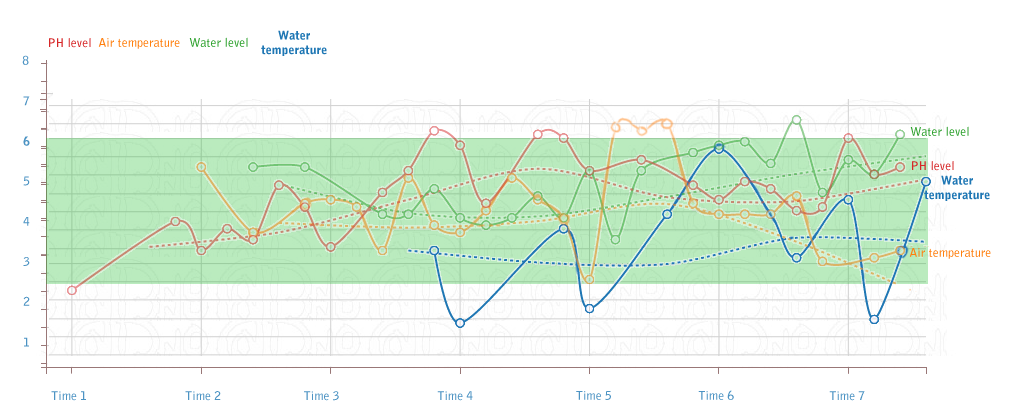
<style>
.page{position:relative;width:1010px;height:416px;background:#ffffff}
.page>*{position:absolute;margin:0}
.t1{font:12px "BellGothicStd-Black";color:#1f77b4}
.t2{font:12px "BellGothicStd-Bold";color:#d62728}
.t3{font:12px "BellGothicStd-Bold";color:#ff7f0e}
.t4{font:12px "BellGothicStd-Bold";color:#2ca02c}
.t5{font:12px "BellGothicStd-Bold";color:#4c93c3}
.t6{font:12px "BellGothicStd-Black";color:#4c93c3}
</style>
<div class="page">
<p class="t1" style="left:261px;top:30px;width:66px;height:26px;text-align:center">Water<br>temperature</p>
<p class="t2" style="left:49px;top:38px;width:42px;height:10px">PH level</p>
<p class="t3" style="left:98px;top:38px;width:82px;height:11px">Air temperature</p>
<p class="t4" style="left:189px;top:37px;width:59px;height:10px">Water level</p>
<p class="t5" style="left:22px;top:55px;width:7px;height:10px">8</p>
<p class="t5" style="left:23px;top:96px;width:7px;height:10px">7</p>
<p class="t4" style="left:910px;top:126px;width:59px;height:10px">Water level</p>
<p class="t6" style="left:23px;top:136px;width:7px;height:10px">6</p>
<p class="t2" style="left:912px;top:161px;width:42px;height:10px">PH level</p>
<p class="t5" style="left:23px;top:176px;width:7px;height:10px">5</p>
<p class="t1" style="left:924px;top:175px;width:66px;height:26px;text-align:center">Water<br>temperature</p>
<p class="t5" style="left:23px;top:217px;width:7px;height:9px">4</p>
<p class="t5" style="left:23px;top:257px;width:7px;height:9px">3</p>
<p class="t3" style="left:909px;top:248px;width:82px;height:11px">Air temperature</p>
<p class="t5" style="left:23px;top:296px;width:7px;height:10px">2</p>
<p class="t5" style="left:24px;top:337px;width:5px;height:10px">1</p>
<p class="t5" style="left:698px;top:390px;width:36px;height:10px">Time 6</p>
<p class="t5" style="left:51px;top:391px;width:35px;height:10px">Time 1</p>
<p class="t5" style="left:185px;top:391px;width:36px;height:10px">Time 2</p>
<p class="t5" style="left:304px;top:391px;width:35px;height:10px">Time 3</p>
<p class="t5" style="left:437px;top:391px;width:36px;height:10px">Time 4</p>
<p class="t5" style="left:576px;top:391px;width:35px;height:9px">Time 5</p>
<p class="t5" style="left:829px;top:391px;width:36px;height:10px">Time 7</p>
</div>
